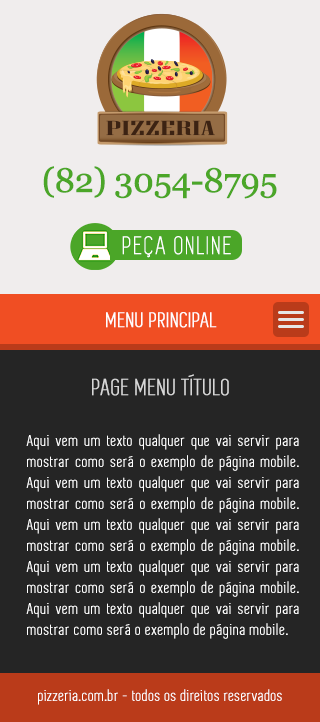
<style>
.page{position:relative;width:320px;height:722px;background:#252525}
.page>*{position:absolute;margin:0}
.t1{font:34px "Georgia";letter-spacing:-0.03em;color:#4ba628;font-weight:bold}
.t2{font:26px "Simplifica";letter-spacing:0.06em;color:#ffffff;font-weight:bold}
.t3{font:22px "Simplifica";letter-spacing:0.032em;color:#fefefe;font-weight:bold}
.t4{font:24px "Simplifica";letter-spacing:0.03em;color:#d7d7d7;font-weight:bold}
.t5{font:16px/21px "Simplifica";letter-spacing:0.04em;color:#ffffff;font-weight:bold}
.t6{font:16px "Simplifica";letter-spacing:0.03em;color:#ffffff;font-weight:bold}
</style>
<div class="page">
<p class="t1" style="left:43px;top:166px;width:234px;height:33px">(82) 3054-8795</p>
<p class="t2" style="left:122px;top:236px;width:109px;height:22px">PEÇA ONLINE</p>
<p class="t3" style="left:106px;top:312px;width:111px;height:16px">MENU PRINCIPAL</p>
<p class="t4" style="left:92px;top:374px;width:137px;height:22px">PAGE MENU TÍTULO</p>
<p class="t5" style="left:26px;top:434px;width:273px;height:205px;text-align:justify">Aqui vem um texto qualquer que vai servir para mostrar como será o exemplo de página mobile. Aqui vem um texto qualquer que vai servir para mostrar como será o exemplo de página mobile. Aqui vem um texto qualquer que vai servir para mostrar como será o exemplo de página mobile. Aqui vem um texto qualquer que vai servir para mostrar como será o exemplo de página mobile. Aqui vem um texto qualquer que vai servir para mostrar como será o exemplo de página mobile.</p>
<p class="t6" style="left:38px;top:689px;width:244px;height:16px">pizzeria.com.br - todos os direitos reservados</p>
</div>
